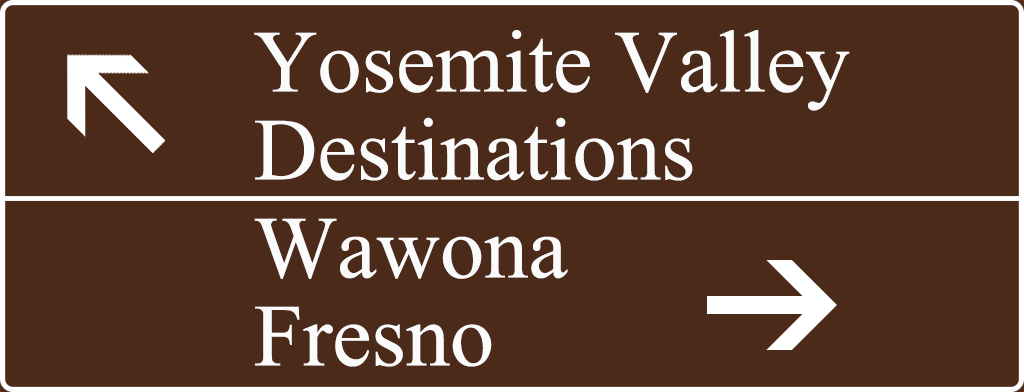
<style>
.page{position:relative;width:1024px;height:392px;background:#4c2a19}
.page>*{position:absolute;margin:0}
.t1{font:88.3px/87.8px "IskoolaPota";color:#fbfbfb}
</style>
<div class="page">
<p class="t1" style="left:254px;top:30px;width:596px;height:151px">Yosemite Valley<br>Destinations</p>
<p class="t1" style="left:254px;top:218px;width:314px;height:149px">Wawona<br>Fresno</p>
</div>
